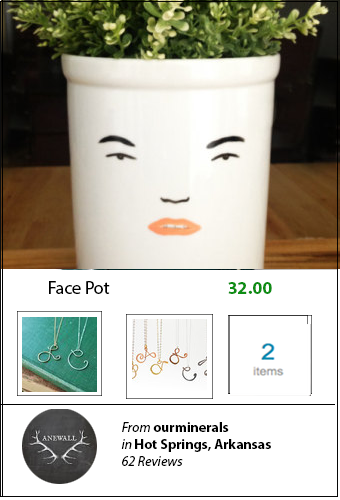
<style>
.page{position:relative;width:340px;height:500px;background:#ffffff}
.page>*{position:absolute;margin:0}
.t1{font:18px "MyriadPro-Regular";color:#000000}
.t2{font:18px "MyriadPro-Bold";color:#0e8d14}
.t3{font:14px "MyriadPro-Bold";color:#000000}
.t4{font:14px "MyriadPro-It";color:#000000}
</style>
<div class="page">
<p class="t1" style="left:49px;top:281px;width:223px;height:13px">Face Pot     <span class="t2">32.00</span></p>
<p class="t3" style="left:121px;top:422px;width:150px;height:44px"><span class="t4"><br>From </span>ourminerals <br><span class="t4">in </span>Hot Springs, Arkansas<br><span class="t4">62 Reviews</span></p>
</div>
